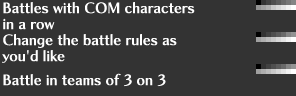
<style>
.page{position:relative;width:296px;height:96px;background:#333333}
.page>*{position:absolute;margin:0}
.t1{font:14px/16px "ChiaroStd-B";color:#ffffff}
.t2{font:12.6px/16px "ChiaroStd-B";color:#ffffff;scale:1.11 1}
</style>
<div class="page">
<p class="t1" style="left:2px;top:2px;width:193px;height:85px">Battles with COM characters<br>in a row<br>Change the battle rules as<br><span class="t2">y</span>ou'd like<br> <br>Battle in teams of 3 on 3</p>
</div>
